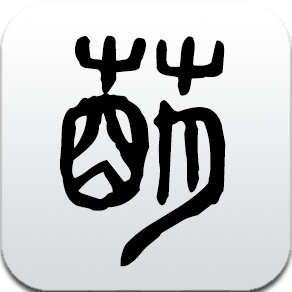
<style>
.page{position:relative;width:292px;height:292px}
.page>*{position:absolute;margin:0}
.t1{font:240px "EBAS";color:#000000}
</style>
<div class="page">
<p class="t1" style="left:59px;top:35px;width:167px;height:232px">萌</p>
</div>
